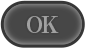
<style>
.page{position:relative;width:85px;height:48px;background:#474747}
.page>*{position:absolute;margin:0}
.t1{font:22px "RyuminPro-ExBold";letter-spacing:-0.08em;color:#a1a1a1}
</style>
<div class="page">
<p class="t1" style="left:27px;top:16px;width:32px;height:17px">OK</p>
</div>
